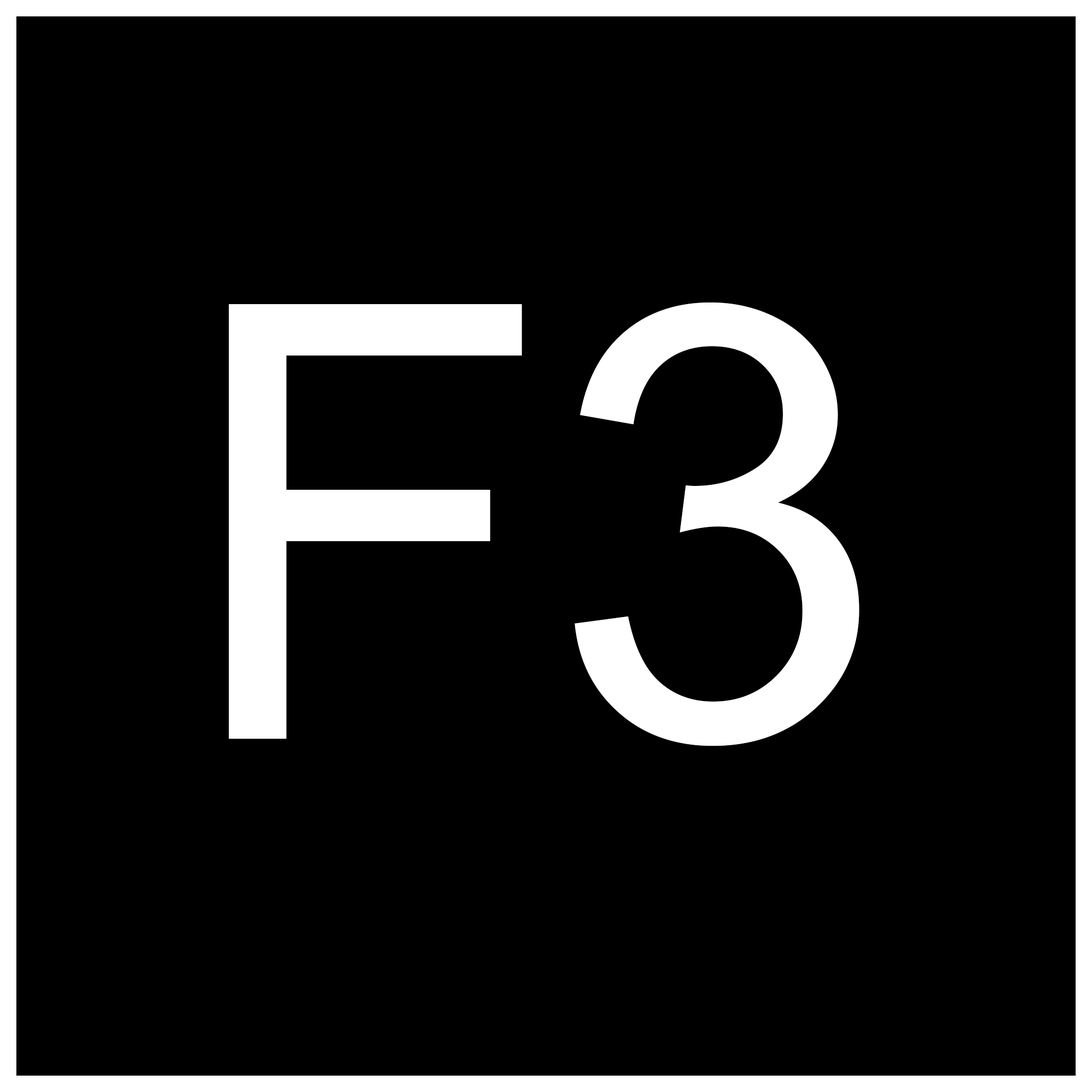
<style>
.page{position:relative;width:1092px;height:1092px;background:#000000}
.page>*{position:absolute;margin:0}
.t1{font:606.7px "ArialMT";color:#ffffff}
</style>
<div class="page">
<p class="t1" style="left:229px;top:302px;width:630px;height:444px">F3</p>
</div>
